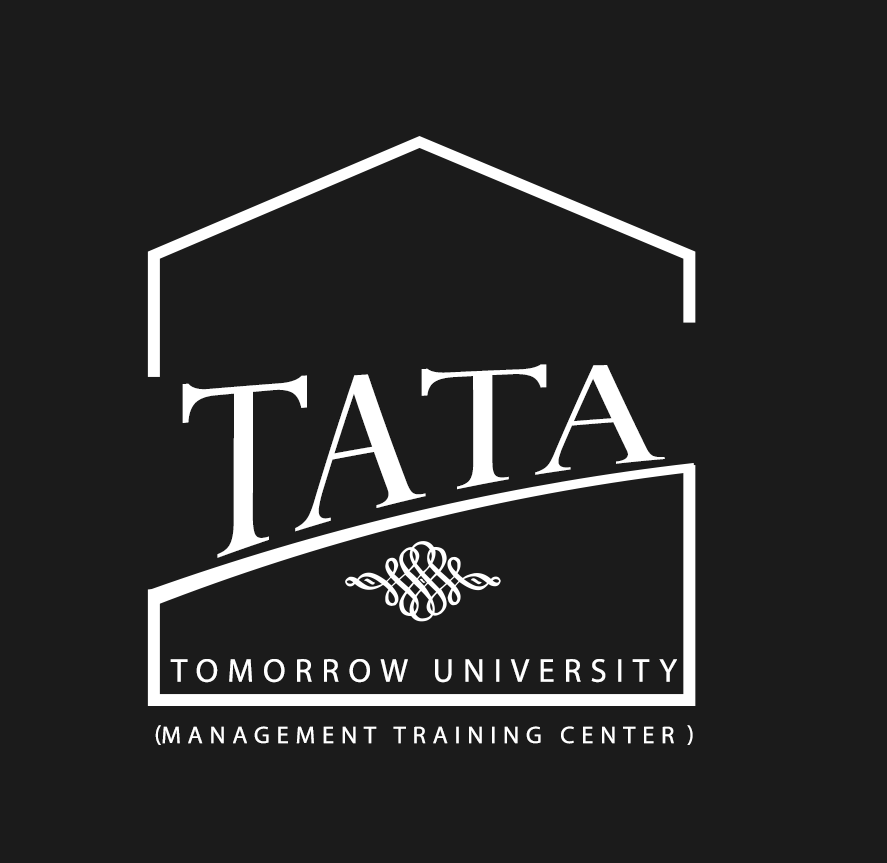
<style>
.page{position:relative;width:887px;height:863px;background:#1b1b1b}
.page>*{position:absolute;margin:0}
.t1{font:238.4px "Perpetua";color:#ffffff;text-transform:uppercase}
.t2{font:33.1px "MyriadPro-Regular";letter-spacing:0.26em;color:#ffffff;text-transform:uppercase}
.t3{font:23.9px "MyriadPro-Regular";letter-spacing:0.26em;color:#ffffff;text-transform:uppercase}
</style>
<div class="page">
<p class="t1" style="left:182px;top:364px;width:483px;height:194px;rotate:-9deg">tata</p>
<p class="t2" style="left:170px;top:659px;width:507px;height:24px">TOMORROW UNIVERSITY</p>
<p class="t3" style="left:155px;top:725px;width:538px;height:20px">(Management training center)</p>
</div>
